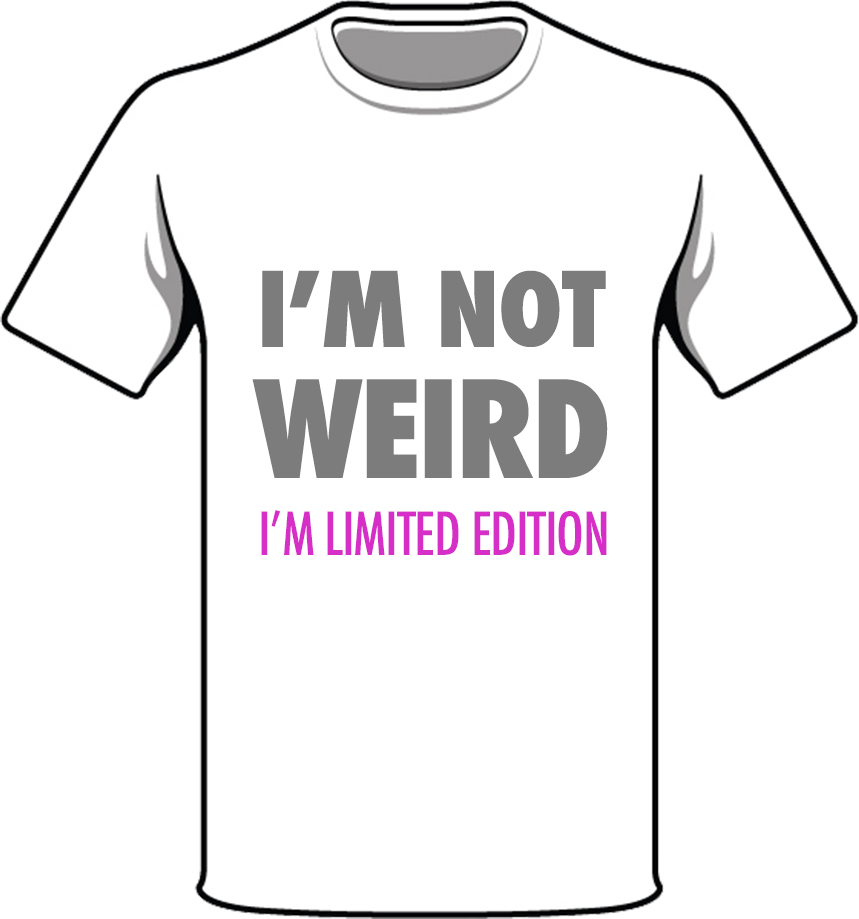
<style>
.page{position:relative;width:859px;height:919px;background:#ffffff}
.page>*{position:absolute;margin:0}
.t1{font:101.1px/131.4px "Futura-CondensedExtraBold";letter-spacing:-0.02em;color:#7c7c7c}
.t2{font:130.9px/131.4px "Futura-CondensedExtraBold";letter-spacing:-0.02em;color:#7c7c7c}
.t3{font:57.7px "Futura-CondensedMedium";letter-spacing:-0.02em;color:#d52fc7}
</style>
<div class="page">
<p class="t1" style="left:252px;top:270px;width:356px;height:208px;text-align:center">I’M NOT<br><span class="t2">WEIRD</span></p>
<p class="t3" style="left:261px;top:510px;width:346px;height:46px">I’M LIMITED EDITION</p>
</div>
